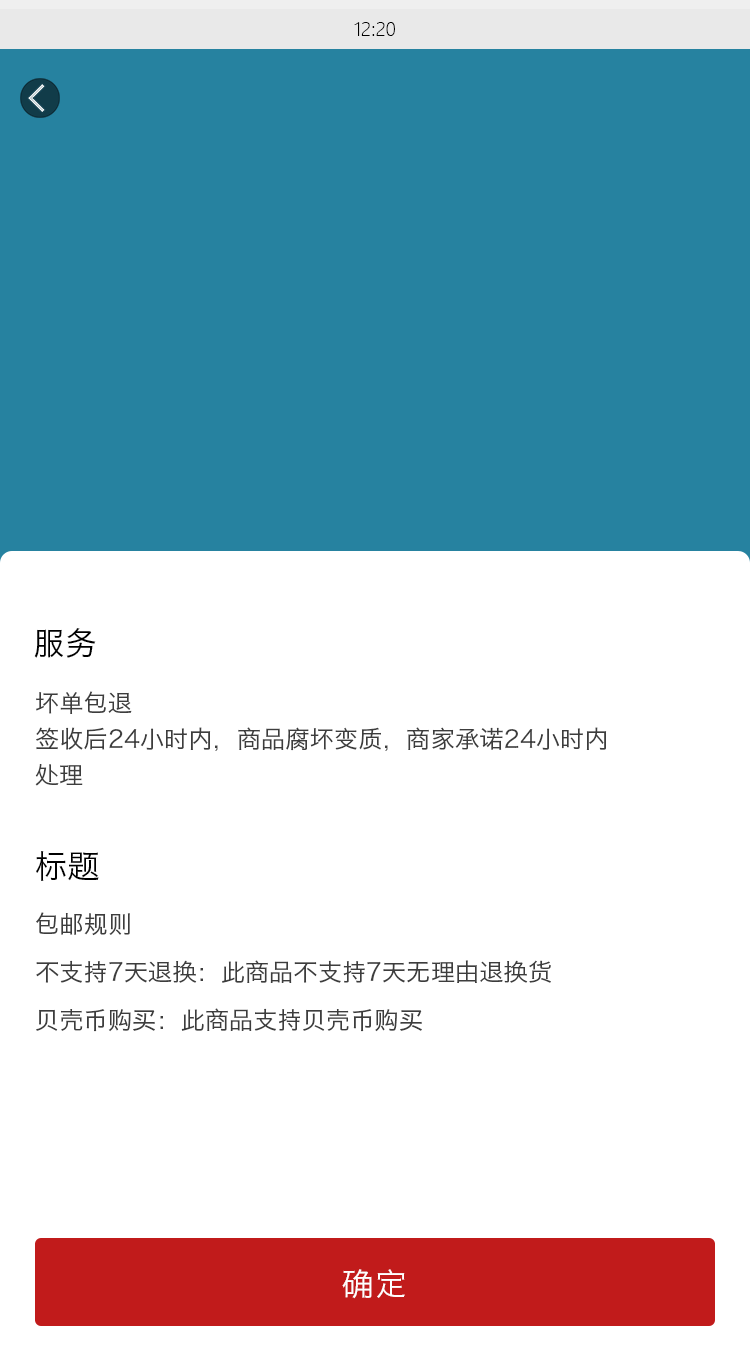
<style>
.page{position:relative;width:750px;height:1350px;background:#ffffff}
.page>*{position:absolute;margin:0}
.t1{font:32px "HiraginoSansGB-W3";color:#000000}
.t2{font:24px/36px "HiraginoSansGB-W3";color:#3d3d3d}
.t3{font:24px/48px "HiraginoSansGB-W3";color:#3d3d3d}
.t4{font:32px "HiraginoSansGB-W3";color:#ffffff}
</style>
<div class="page">
<p class="t1" style="left:34px;top:628px;width:62px;height:30px">服务</p>
<p class="t2" style="left:35px;top:691px;width:572px;height:95px">坏单包退<br>签收后24小时内，商品腐坏变质，商家承诺24小时内<br>处理</p>
<p class="t1" style="left:36px;top:851px;width:63px;height:30px">标题</p>
<p class="t3" style="left:36px;top:912px;width:515px;height:120px">包邮规则<br>不支持7天退换：此商品不支持7天无理由退换货<br>贝壳币购买：此商品支持贝壳币购买</p>
<p class="t4" style="left:342px;top:1269px;width:63px;height:30px">确定</p>
</div>
